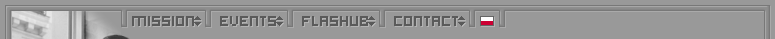
<style>
.page{position:relative;width:775px;height:39px;background:#999999}
.page>*{position:absolute;margin:0}
.t1{font:16px "Hooge0555";color:#5a5a5a}
</style>
<div class="page">
<p class="t1" style="left:132px;top:16px;width:326px;height:10px">MISSION    EVENTS    FLASHUB    CONTACT</p>
</div>
